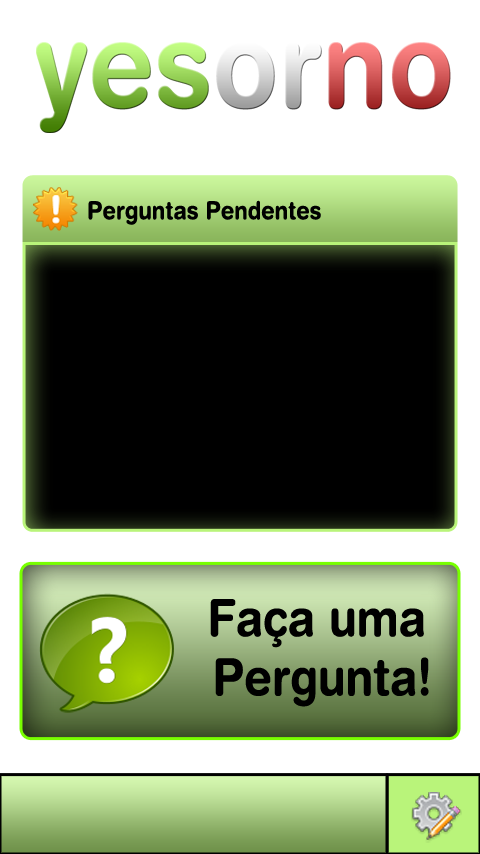
<style>
.page{position:relative;width:480px;height:854px;background:#ffffff}
.page>*{position:absolute;margin:0}
.t1{font:25px "HelveticaRounded-Bold";color:#000000;scale:0.88 1}
.t2{font:51.4px "HelveticaRounded-Bold";color:#000000;scale:0.88 1}
</style>
<div class="page">
<p class="t1" style="left:88px;top:200px;width:233px;height:25px">Perguntas Pendentes</p>
<p class="t2" style="left:210px;top:599px;width:214px;height:49px">Faça uma</p>
<p class="t2" style="left:215px;top:657px;width:214px;height:50px">Pergunta!</p>
</div>
